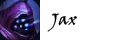
<style>
.page{position:relative;width:140px;height:40px;background:#ffffff}
.page>*{position:absolute;margin:0}
.t1{font:12px "VinerHandITC";color:#000000}
</style>
<div class="page">
<p class="t1" style="left:47px;top:13px;width:30px;height:19px">Jax</p>
</div>
